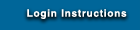
<style>
.page{position:relative;width:140px;height:30px;background:#006699}
.page>*{position:absolute;margin:0}
.t1{font:10px "Helvetica-Bold";letter-spacing:0.075em;color:#ffffff}
</style>
<div class="page">
<p class="t1" style="left:12px;top:4px;width:130px;height:19px">Login Instructions</p>
</div>
